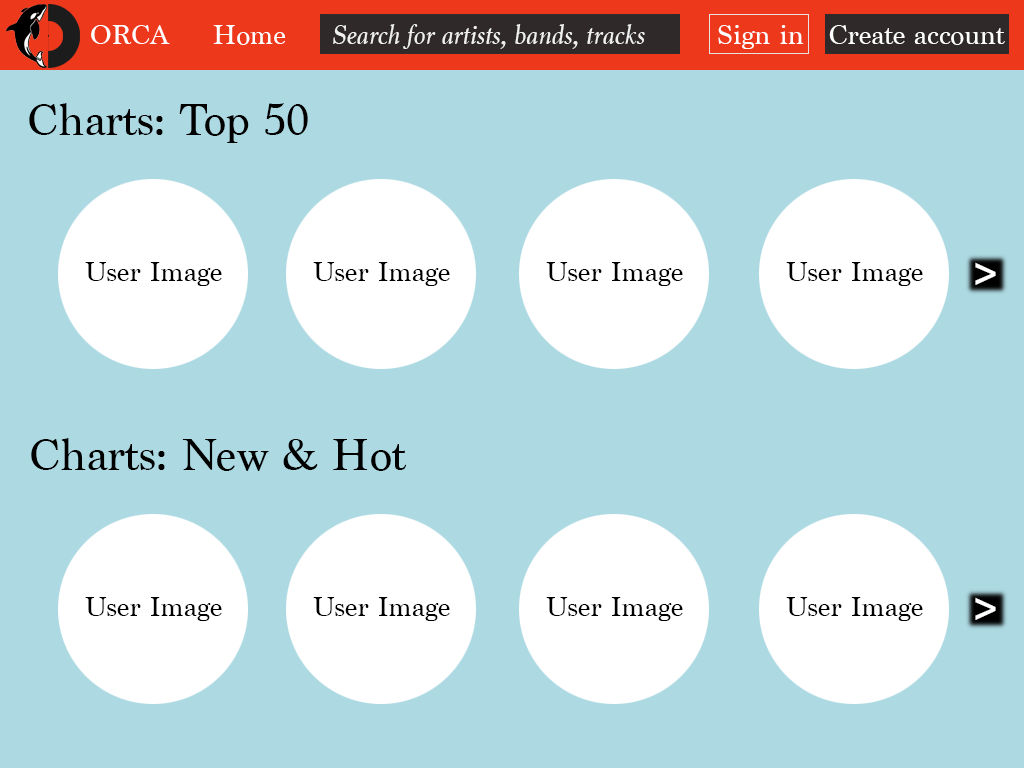
<style>
.page{position:relative;width:1024px;height:768px;background:#add9e2}
.page>*{position:absolute;margin:0}
.t1{font:29.2px "Marion-Regular";color:#ffffff}
.t2{font:29.2px "Marion-Italic";color:#f0f0f0}
.t3{font:47px "Marion-Regular";color:#000000}
.t4{font:29.2px "Marion-Regular";color:#000000}
.t5{font:41.7px "MyriadPro-Bold";color:#ffffff}
</style>
<div class="page">
<p class="t1" style="left:91px;top:25px;width:79px;height:19px">ORCA</p>
<p class="t1" style="left:213px;top:25px;width:73px;height:20px">Home</p>
<p class="t2" style="left:333px;top:24px;width:312px;height:25px">Search for artists, bands, tracks</p>
<p class="t1" style="left:718px;top:25px;width:86px;height:24px">Sign in</p>
<p class="t1" style="left:829px;top:25px;width:176px;height:20px">Create account</p>
<p class="t3" style="left:29px;top:103px;width:279px;height:40px">Charts: Top 50</p>
<p class="t4" style="left:85px;top:262px;width:137px;height:24px">User Image</p>
<p class="t4" style="left:313px;top:262px;width:137px;height:24px">User Image</p>
<p class="t4" style="left:546px;top:262px;width:137px;height:24px">User Image</p>
<p class="t4" style="left:786px;top:262px;width:137px;height:24px">User Image</p>
<p class="t5" style="left:975px;top:262px;width:21px;height:23px">&gt;</p>
<p class="t3" style="left:31px;top:438px;width:376px;height:33px">Charts: New &amp; Hot</p>
<p class="t4" style="left:85px;top:597px;width:137px;height:24px">User Image</p>
<p class="t4" style="left:313px;top:597px;width:137px;height:24px">User Image</p>
<p class="t4" style="left:546px;top:597px;width:137px;height:24px">User Image</p>
<p class="t4" style="left:786px;top:597px;width:137px;height:24px">User Image</p>
<p class="t5" style="left:975px;top:597px;width:21px;height:23px">&gt;</p>
</div>
